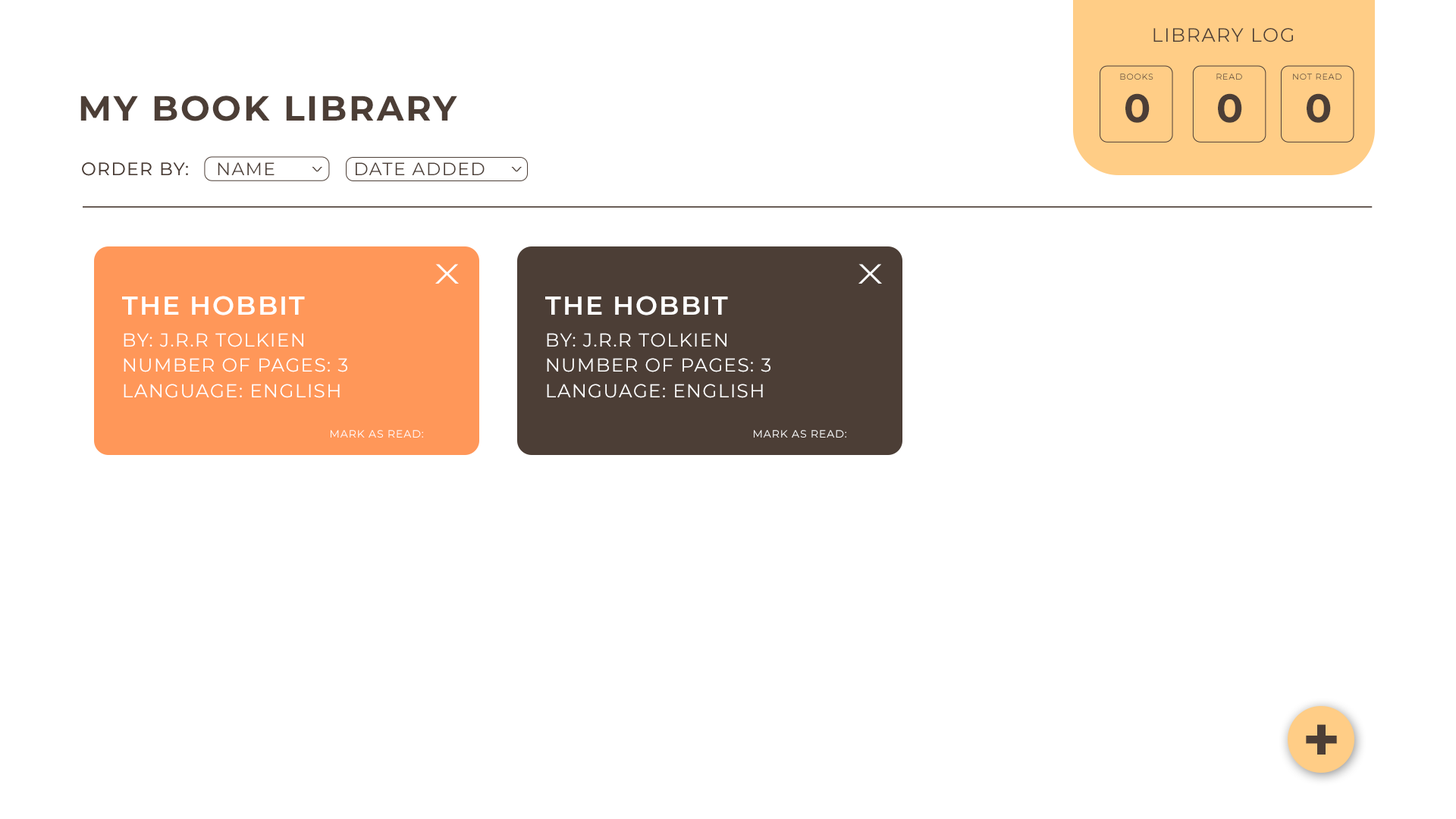
<style>
.page{position:relative;width:1456px;height:819px;background:#ffffff}
.page>*{position:absolute;margin:0}
.t1{font:19.1px "Montserrat-Regular";letter-spacing:0.06em;color:#4c3e36;text-transform:uppercase}
.t2{font:8.5px "Montserrat-Regular";letter-spacing:0.06em;text-transform:uppercase}
.t3{font:8.5px "Montserrat-Regular";letter-spacing:0.06em;color:#4c3e36;text-transform:uppercase}
.t4{font:34.9px "Montserrat-Bold";letter-spacing:0.06em;color:#4c3e36;text-transform:uppercase}
.t5{font:39.5px "Montserrat-Bold";letter-spacing:0.06em;color:#4c3e36;text-transform:uppercase}
.t6{font:17.8px "Montserrat-Regular";letter-spacing:0.06em;color:#4c3e36;text-transform:uppercase}
.t7{font:24.6px "Montserrat-Regular";letter-spacing:0.06em;color:#4c3e36;text-transform:uppercase;scale:0.45 1}
.t8{font:27.7px "Montserrat-Regular";letter-spacing:0.06em;color:#ffffff;text-transform:uppercase;scale:1.37 1}
.t9{font:26.1px "Montserrat-SemiBold";letter-spacing:0.06em;color:#ffffff;text-transform:uppercase}
.t10{font:18.6px "Montserrat-Regular";letter-spacing:0.06em;color:#ffffff;text-transform:uppercase}
.t11{font:10.7px "Montserrat-Regular";letter-spacing:0.06em;color:#ffffff;text-transform:uppercase}
.t12{font:64.6px "Montserrat-Bold";letter-spacing:0.06em;color:#4c3e36;text-transform:uppercase}
</style>
<div class="page">
<p class="t1" style="left:1153px;top:28px;width:140px;height:14px">Library Log</p>
<p class="t2" style="left:1120px;top:74px;width:33px;height:6px">BOOKS</p>
<p class="t3" style="left:1216px;top:74px;width:26px;height:6px">READ</p>
<p class="t2" style="left:1293px;top:74px;width:48px;height:6px">NOT READ</p>
<p class="t4" style="left:80px;top:96px;width:377px;height:25px">My Book LibrarY</p>
<p class="t5" style="left:1125px;top:93px;width:25px;height:30px">0</p>
<p class="t5" style="left:1218px;top:93px;width:24px;height:30px">0</p>
<p class="t5" style="left:1307px;top:93px;width:24px;height:30px">0</p>
<p class="t6" style="left:82px;top:162px;width:106px;height:14px">Order by:</p>
<p class="t6" style="left:82px;top:162px;width:106px;height:14px">Order by:</p>
<p class="t6" style="left:218px;top:162px;width:57px;height:13px">name</p>
<p class="t7" style="left:312px;top:167px;width:10px;height:5px;rotate:90deg">&gt;</p>
<p class="t6" style="left:356px;top:162px;width:129px;height:13px">DATE ADDED</p>
<p class="t7" style="left:511px;top:167px;width:11px;height:5px;rotate:90deg">&gt;</p>
<p class="t8" style="left:435px;top:264px;width:24px;height:20px">X</p>
<p class="t8" style="left:858px;top:264px;width:24px;height:20px">X</p>
<p class="t9" style="left:122px;top:296px;width:183px;height:19px">THE HOBBIT</p>
<p class="t9" style="left:545px;top:296px;width:183px;height:19px">THE HOBBIT</p>
<p class="t10" style="left:124px;top:333px;width:179px;height:14px">By: J.R.R TOLKIEN</p>
<p class="t10" style="left:547px;top:333px;width:179px;height:14px">By: J.R.R TOLKIEN</p>
<p class="t10" style="left:124px;top:358px;width:223px;height:14px">Number Of PAges: 3</p>
<p class="t10" style="left:547px;top:358px;width:223px;height:14px">Number Of PAges: 3</p>
<p class="t10" style="left:124px;top:384px;width:216px;height:14px">LANGUAGE: ENGLISH</p>
<p class="t10" style="left:547px;top:384px;width:216px;height:14px">LANGUAGE: ENGLISH</p>
<p class="t11" style="left:331px;top:430px;width:92px;height:8px">MARK as read:</p>
<p class="t11" style="left:754px;top:430px;width:92px;height:8px">MARK as read:</p>
<p class="t12" style="left:1306px;top:724px;width:31px;height:31px">+</p>
</div>
